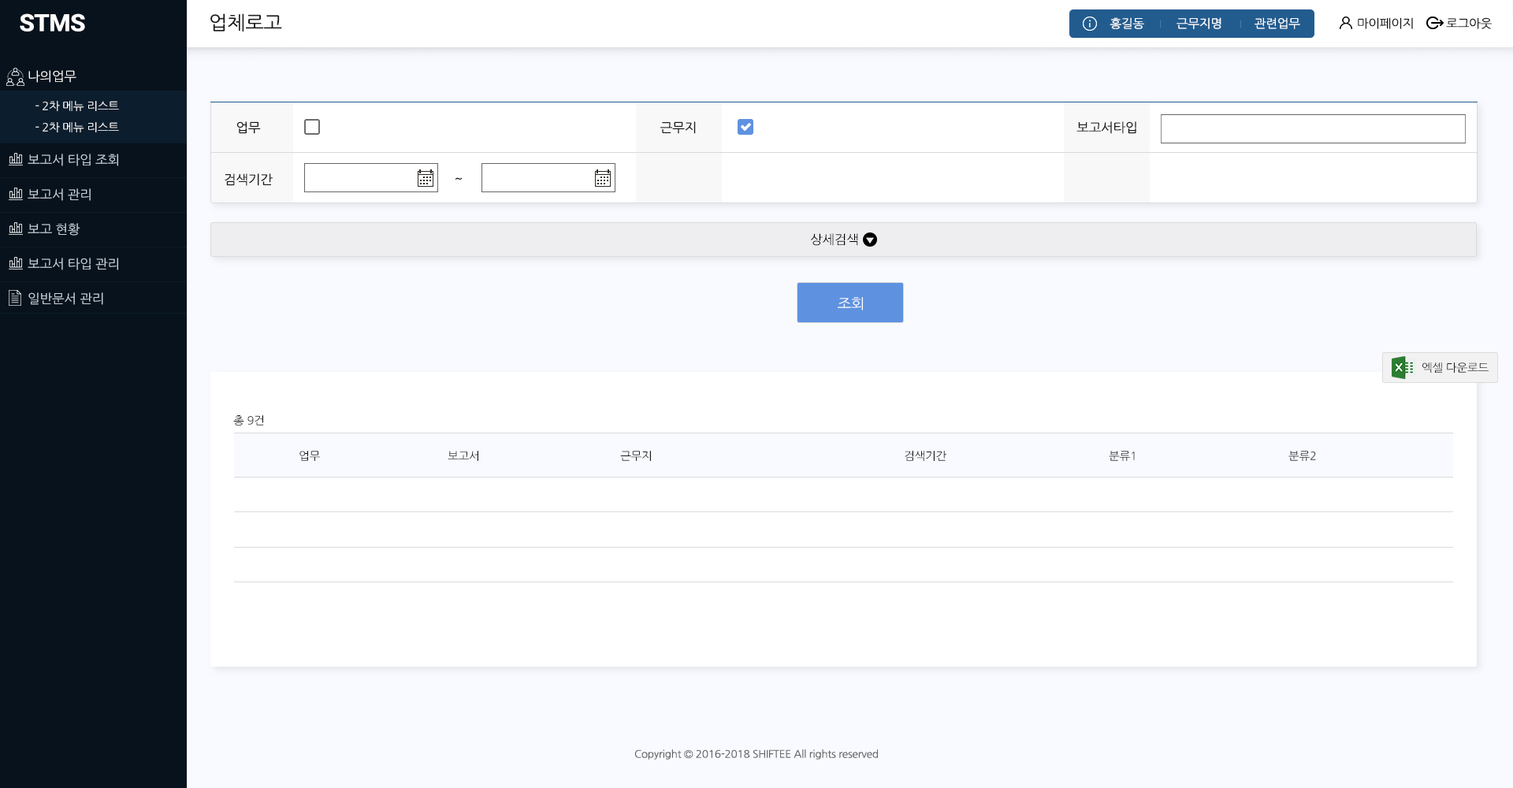
<style>
.page{position:relative;width:1513px;height:788px;background:#ffffff}
.page>*{position:absolute;margin:0}
.t1{font:23.6px "Roboto-Bold";letter-spacing:-0.02em;color:#ffffff;scale:1.05 1}
.t2{font:18.9px "NanumGothic";letter-spacing:-0.02em;color:#1b1b1b;scale:1.05 1}
.t3{font:11.8px "NanumGothic";letter-spacing:-0.02em;color:#ffffff;scale:1.05 1}
.t4{font:11.8px "NanumGothic";letter-spacing:-0.02em;color:#1b1b1b;scale:1.05 1}
.t5{font:12.6px "NanumGothic";letter-spacing:-0.02em;color:#ffffff;scale:1.05 1}
.t6{font:11px/21.3px "NanumGothic";letter-spacing:-0.02em;color:#ffffff;scale:1.05 1}
.t7{font:12.6px "NanumGothic";letter-spacing:-0.02em;color:#1b1b1b;scale:1.05 1}
.t8{font:12.6px/34.7px "NanumGothic";letter-spacing:-0.02em;color:#cad7e2;scale:1.05 1}
.t9{font:12.6px "NanumGothic";letter-spacing:-0.02em;color:#000000;scale:1.05 1}
.t10{font:14.2px "NanumGothic";letter-spacing:-0.02em;color:#ffffff;scale:1.05 1}
.t11{font:11px "NanumGothic";letter-spacing:-0.02em;color:#1b1b1b;scale:1.05 1}
.t12{font:10.2px "NanumGothic";letter-spacing:-0.02em;color:#666666;scale:1.05 1}
</style>
<div class="page">
<p class="t1" style="left:20px;top:13px;width:65px;height:19px">STMS</p>
<p class="t2" style="left:210px;top:13px;width:72px;height:19px">업체로고</p>
<p class="t3" style="left:1110px;top:17px;width:190px;height:12px">홍길동          근무지명          관련업무</p>
<p class="t4" style="left:1358px;top:17px;width:55px;height:12px">마이페이지</p>
<p class="t4" style="left:1446px;top:17px;width:46px;height:12px">로그아웃</p>
<p class="t5" style="left:28px;top:70px;width:48px;height:13px">나의업무</p>
<p class="t6" style="left:35px;top:101px;width:84px;height:31px">- 2차 메뉴 리스트<br>- 2차 메뉴 리스트</p>
<p class="t7" style="left:236px;top:121px;width:25px;height:13px">업무</p>
<p class="t7" style="left:660px;top:121px;width:36px;height:13px">근무지</p>
<p class="t7" style="left:1077px;top:121px;width:59px;height:13px">보고서타입</p>
<p class="t8" style="left:28px;top:154px;width:90px;height:151px">보고서 타입 조회<br>보고서 관리<br>보고 현황<br>보고서 타입 관리<br>일반문서 관리</p>
<p class="t7" style="left:225px;top:173px;width:48px;height:13px">검색기간</p>
<p class="t7" style="left:455px;top:177px;width:8px;height:3px">~</p>
<p class="t9" style="left:810px;top:233px;width:48px;height:13px">상세검색</p>
<p class="t10" style="left:838px;top:297px;width:25px;height:14px">조회</p>
<p class="t11" style="left:1422px;top:363px;width:67px;height:10px">엑셀 다운로드</p>
<p class="t11" style="left:233px;top:415px;width:31px;height:11px">총 9건</p>
<p class="t11" style="left:299px;top:451px;width:21px;height:10px">업무</p>
<p class="t11" style="left:448px;top:451px;width:30px;height:10px">보고서</p>
<p class="t11" style="left:620px;top:451px;width:31px;height:10px">근무지</p>
<p class="t11" style="left:905px;top:451px;width:41px;height:10px">검색기간</p>
<p class="t11" style="left:1109px;top:451px;width:26px;height:10px">분류1</p>
<p class="t11" style="left:1288px;top:451px;width:28px;height:10px">분류2</p>
<p class="t12" style="left:634px;top:749px;width:244px;height:11px">Copyright © 2016-2018 SHIFTEE All rights reserved</p>
</div>
